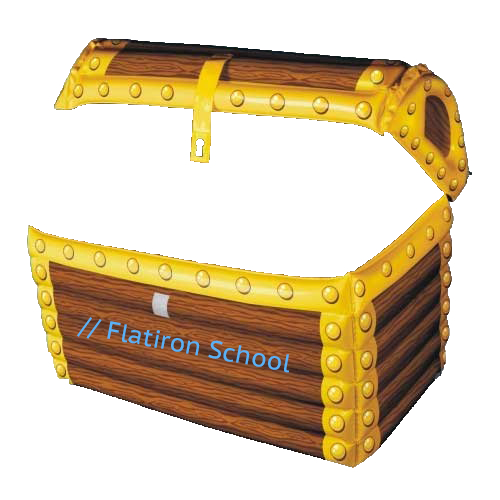
<style>
.page{position:relative;width:500px;height:500px;background:#ffffff}
.page>*{position:absolute;margin:0}
.t1{font:25px "PTSans-Caption";color:#59b2f5}
</style>
<div class="page">
<p class="t1" style="left:77px;top:317px;width:212px;height:56px;rotate:10deg">// Flatiron School</p>
</div>
